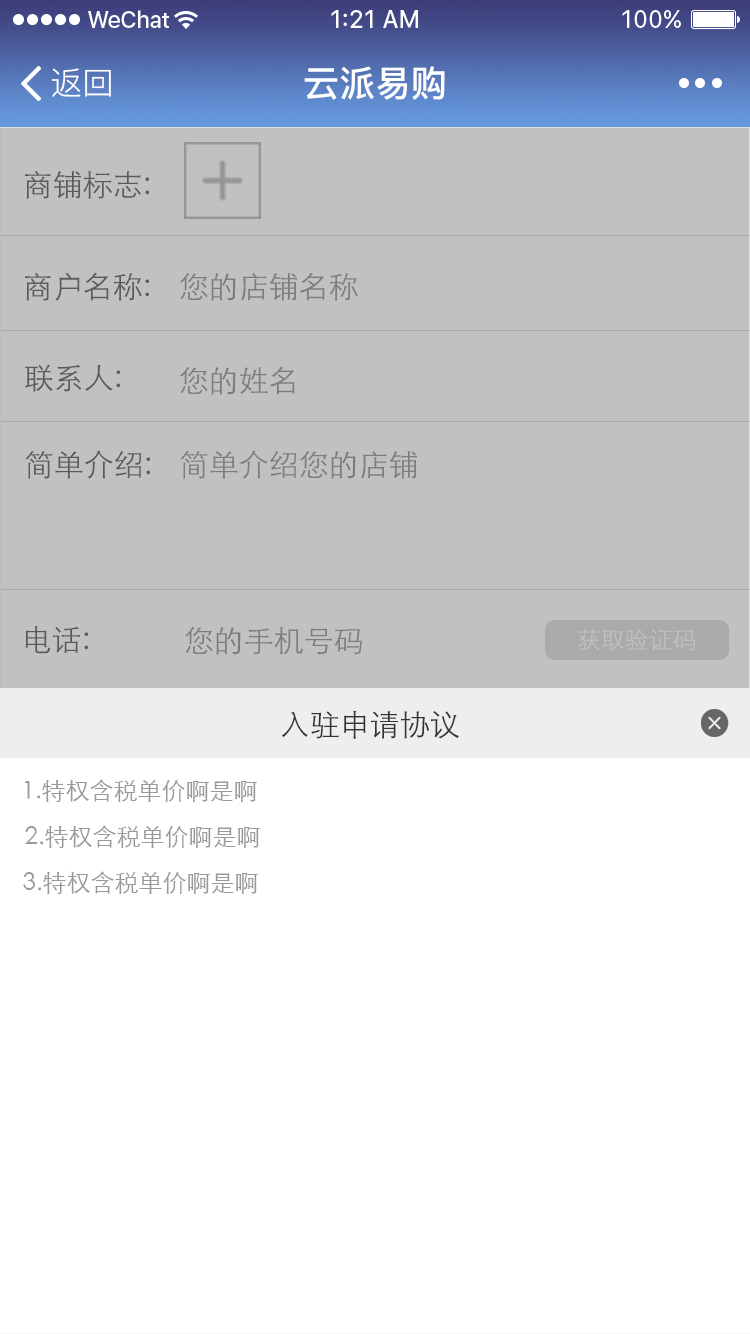
<style>
.page{position:relative;width:750px;height:1334px;background:#ffffff}
.page>*{position:absolute;margin:0}
.t1{font:32px "PingFang-SC-Regular";color:#ffffff}
.t2{font:36px "PingFang-SC-Bold";color:#ffffff}
.t3{font:30px "STXihei";color:#666666}
.t4{font:30px "STXihei";color:#7d7d7d}
.t5{font:24px "STXihei";color:#c1c1c1}
.t6{font:30px "STXihei";color:#333333}
.t7{font:24px "STXihei";color:#999999}
</style>
<div class="page">
<p class="t1" style="left:52px;top:68px;width:59px;height:29px">返回</p>
<p class="t2" style="left:304px;top:66px;width:141px;height:34px">云派易购</p>
<p class="t3" style="left:25px;top:170px;width:124px;height:29px">商铺标志:</p>
<p class="t3" style="left:25px;top:272px;width:124px;height:29px">商户名称:</p>
<p class="t4" style="left:180px;top:272px;width:178px;height:29px">您的店铺名称</p>
<p class="t3" style="left:24px;top:364px;width:96px;height:28px">联系人:</p>
<p class="t4" style="left:180px;top:366px;width:115px;height:29px">您的姓名</p>
<p class="t3" style="left:25px;top:450px;width:125px;height:29px">简单介绍:</p>
<p class="t4" style="left:180px;top:450px;width:237px;height:29px">简单介绍您的店铺</p>
<p class="t3" style="left:25px;top:626px;width:63px;height:28px">电话:</p>
<p class="t4" style="left:185px;top:626px;width:177px;height:29px">您的手机号码</p>
<p class="t5" style="left:578px;top:629px;width:118px;height:22px">获取验证码</p>
<p class="t6" style="left:281px;top:710px;width:178px;height:29px">入驻申请协议</p>
<p class="t7" style="left:25px;top:779px;width:232px;height:23px">1.特权含税单价啊是啊</p>
<p class="t7" style="left:25px;top:825px;width:235px;height:23px">2.特权含税单价啊是啊</p>
<p class="t7" style="left:23px;top:871px;width:235px;height:23px">3.特权含税单价啊是啊</p>
</div>
